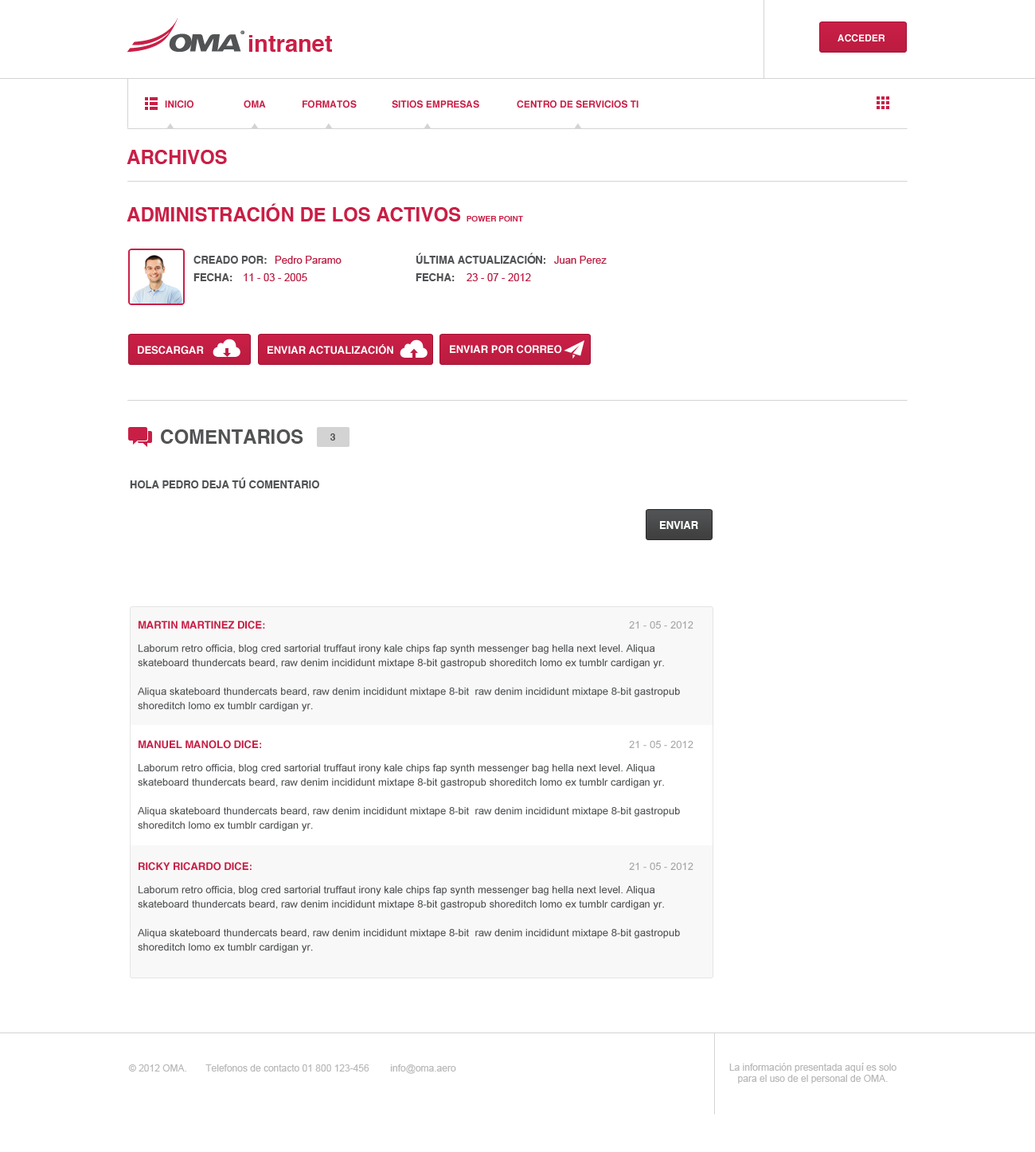
<style>
.page{position:relative;width:1035px;height:1152px;background:#ffffff}
.page>*{position:absolute;margin:0}
.t1{font:23.1px "Helvetica-Bold";color:#c91f46}
.t2{font:9.6px "Helvetica-Bold";color:#ffffff;text-transform:uppercase}
.t3{font:9.6px "Helvetica-Bold";color:#c91f46}
.t4{font:9.6px "Helvetica-Bold";color:#c91f46;text-transform:uppercase}
.t5{font:19.1px "Helvetica-Bold";color:#c91f46;text-transform:uppercase}
.t6{font:8px "Helvetica-Bold";color:#c91f46;text-transform:uppercase}
.t7{font:10.4px "Helvetica-Bold";color:#515355;text-transform:uppercase}
.t8{font:10.4px "ArialMT";color:#bc1b40}
.t9{font:10.4px "Helvetica-Bold";color:#ffffff;text-transform:uppercase}
.t10{font:19.1px "Helvetica-Bold";color:#515355;text-transform:uppercase}
.t11{font:9.6px "Helvetica-Bold";color:#515355;text-transform:uppercase}
.t12{font:10.4px "Helvetica-Bold";color:#c91f46;text-transform:uppercase}
.t13{font:10.4px "ArialMT";color:#a4a5a6}
.t14{font:10.4px/14.3px "ArialMT";color:#515355}
.t15{font:10.4px "ArialMT";color:#a8a9aa}
.t16{font:9.6px "ArialMT";color:#b9b9b9}
</style>
<div class="page">
<p class="t1" style="left:248px;top:35px;width:84px;height:17px">intranet</p>
<p class="t2" style="left:838px;top:34px;width:48px;height:8px">Acceder</p>
<p class="t3" style="left:165px;top:100px;width:29px;height:8px">INICIO</p>
<p class="t3" style="left:244px;top:100px;width:22px;height:8px">OMA</p>
<p class="t4" style="left:303px;top:100px;width:54px;height:8px">formatos</p>
<p class="t4" style="left:392px;top:100px;width:87px;height:8px">sitios empresas</p>
<p class="t4" style="left:517px;top:100px;width:122px;height:8px">centro de servicios ti</p>
<p class="t5" style="left:127px;top:150px;width:100px;height:14px">Archivos</p>
<p class="t5" style="left:127px;top:203px;width:396px;height:18px">Administración de los activos <span class="t6">POWER POINT</span></p>
<p class="t7" style="left:194px;top:256px;width:73px;height:8px">creado por:</p>
<p class="t8" style="left:275px;top:256px;width:67px;height:8px">Pedro Paramo</p>
<p class="t7" style="left:416px;top:252px;width:130px;height:12px">Última actualización:</p>
<p class="t8" style="left:554px;top:256px;width:53px;height:8px">Juan Perez</p>
<p class="t7" style="left:194px;top:273px;width:39px;height:8px">Fecha:</p>
<p class="t8" style="left:244px;top:273px;width:63px;height:8px">11 - 03 - 2005</p>
<p class="t7" style="left:416px;top:273px;width:39px;height:8px">Fecha:</p>
<p class="t8" style="left:467px;top:273px;width:64px;height:8px">23 - 07 - 2012</p>
<p class="t9" style="left:138px;top:346px;width:66px;height:8px">descargar</p>
<p class="t9" style="left:268px;top:344px;width:125px;height:10px">enviar actualización</p>
<p class="t9" style="left:450px;top:345px;width:112px;height:9px">enviar por correo</p>
<p class="t10" style="left:161px;top:429px;width:142px;height:15px">comentarios</p>
<p class="t11" style="left:331px;top:433px;width:4px;height:7px">3</p>
<p class="t7" style="left:130px;top:477px;width:189px;height:11px">Hola pedro deja tú comentario</p>
<p class="t9" style="left:659px;top:521px;width:39px;height:8px">Enviar</p>
<p class="t12" style="left:139px;top:620px;width:126px;height:9px">martin martinez dice:</p>
<p class="t13" style="left:629px;top:620px;width:65px;height:8px">21 - 05 - 2012</p>
<p class="t14" style="left:138px;top:644px;width:542px;height:67px">Laborum retro officia, blog cred sartorial truffaut irony kale chips fap synth messenger bag hella next level. Aliqua skateboard thundercats beard, raw denim incididunt mixtape 8-bit gastropub shoreditch lomo ex tumblr cardigan yr.<br><br>Aliqua skateboard thundercats beard, raw denim incididunt mixtape 8-bit  raw denim incididunt mixtape 8-bit gastropub shoreditch lomo ex tumblr cardigan yr.</p>
<p class="t12" style="left:139px;top:740px;width:122px;height:9px">Manuel manolo dice:</p>
<p class="t15" style="left:629px;top:740px;width:65px;height:8px">21 - 05 - 2012</p>
<p class="t14" style="left:138px;top:764px;width:542px;height:67px">Laborum retro officia, blog cred sartorial truffaut irony kale chips fap synth messenger bag hella next level. Aliqua skateboard thundercats beard, raw denim incididunt mixtape 8-bit gastropub shoreditch lomo ex tumblr cardigan yr.<br><br>Aliqua skateboard thundercats beard, raw denim incididunt mixtape 8-bit  raw denim incididunt mixtape 8-bit gastropub shoreditch lomo ex tumblr cardigan yr.</p>
<p class="t12" style="left:139px;top:862px;width:113px;height:9px">ricky ricardo dice:</p>
<p class="t13" style="left:629px;top:862px;width:65px;height:8px">21 - 05 - 2012</p>
<p class="t14" style="left:138px;top:886px;width:542px;height:67px">Laborum retro officia, blog cred sartorial truffaut irony kale chips fap synth messenger bag hella next level. Aliqua skateboard thundercats beard, raw denim incididunt mixtape 8-bit gastropub shoreditch lomo ex tumblr cardigan yr.<br><br>Aliqua skateboard thundercats beard, raw denim incididunt mixtape 8-bit  raw denim incididunt mixtape 8-bit gastropub shoreditch lomo ex tumblr cardigan yr.</p>
<p class="t16" style="left:128px;top:1064px;width:328px;height:10px">© 2012 OMA.       Telefonos de contacto 01 800 123-456        info@oma.aero</p>
<p class="t16" style="left:730px;top:1062px;width:167px;height:21px;text-align:center">La información presentada aquí es solo<br>para el uso de el personal de OMA.</p>
</div>
